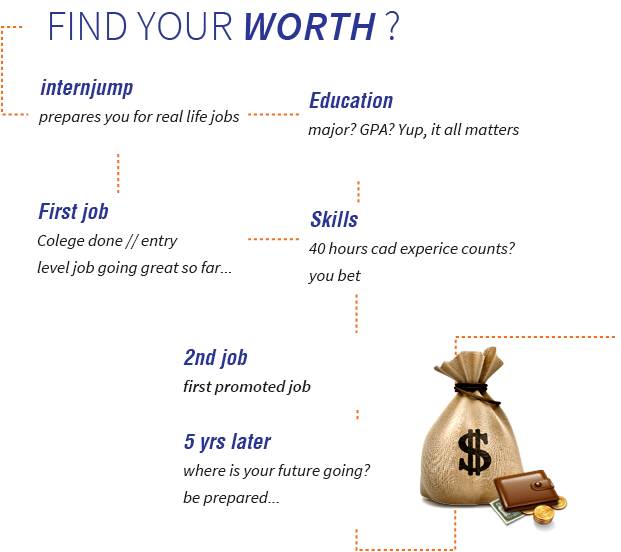
<style>
.page{position:relative;width:621px;height:552px;background:#ffffff}
.page>*{position:absolute;margin:0}
.t1{font:42.3px "SourceSansPro-Light";color:#2b388d;text-transform:uppercase}
.t2{font:42.3px "SourceSansPro-SemiboldIt";color:#2b3593;text-transform:uppercase}
.t3{font:17px/24px "SourceSansPro-It";color:#1d1d1b}
.t4{font:21px/24px "HelveticaLT-Condensed-BoldObl";color:#2b3593}
.t5{font:17px/24px "SourceSansPro-SemiboldIt";color:#1d1d1b}
</style>
<div class="page">
<p class="t1" style="left:50px;top:11px;width:349px;height:29px">find your <span class="t2">WORTH </span>?</p>
<p class="t3" style="left:38px;top:79px;width:202px;height:46px"><span class="t4">internjump<br></span>prepares you for real life jobs</p>
<p class="t3" style="left:308px;top:92px;width:212px;height:47px"><span class="t4">Education<br></span>major? GPA? Yup, it all matters</p>
<p class="t3" style="left:37px;top:203px;width:194px;height:73px"><span class="t4">First job<br></span>Colege done // entry<br>level job going great so far...</p>
<p class="t3" style="left:307px;top:211px;width:208px;height:73px"><span class="t4">Skills<br></span>40 hours cad experice counts? <br>you bet</p>
<p class="t5" style="left:183px;top:349px;width:128px;height:46px"><span class="t4">2nd job<br></span>first promoted job</p>
<p class="t3" style="left:183px;top:433px;width:188px;height:73px"><span class="t4">5 yrs later<br></span>where is your future going?<br>be prepared...</p>
</div>
